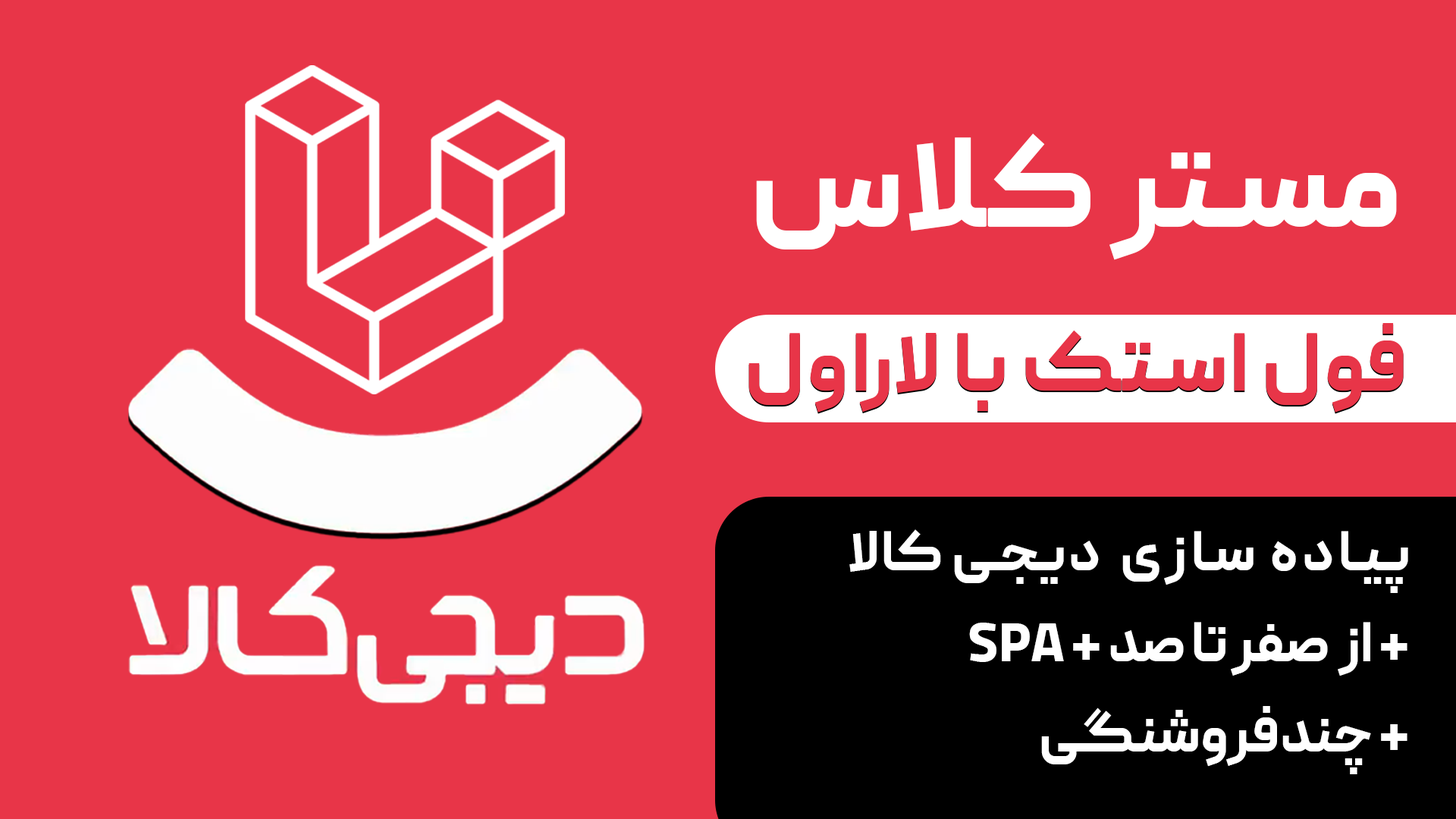
<style>
.page{position:relative;width:1456px;height:819px;background:#e83548}
.page>*{position:absolute;margin:0}
.t1{font:128px "Peyda-ExtraBold";letter-spacing:0.04em;color:#ffffff;text-transform:uppercase}
.t2{font:82.4px "Peyda-ExtraBold";letter-spacing:0.04em;color:#e83548;text-transform:uppercase}
.t3{font:56.2px/90.7px "Peyda-ExtraBold";color:#ffffff;text-transform:uppercase}
.t4{font:56.2px/84.8px "Peyda-ExtraBold";letter-spacing:0.08em;color:#ffffff;text-transform:uppercase}
.t5{font:56.2px/84.8px "Peyda-ExtraBold";letter-spacing:0.04em;color:#ffffff;text-transform:uppercase}
</style>
<div class="page">
<p class="t1" style="left:756px;top:133px;width:641px;height:127px">مستر کلاس</p>
<p class="t2" style="left:748px;top:323px;width:656px;height:90px">فول استک با لاراول</p>
<p class="t3" style="left:849px;top:529px;width:559px;height:245px"><span class="t4">پیاده سازی </span><span class="t5"> دیجی کالا<br></span>+ از  صفر تا صد + SPA<br>+ چندفروشنگی</p>
</div>
